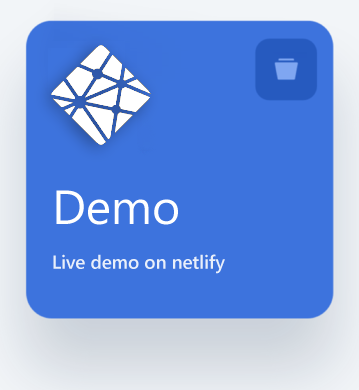
<style>
.page{position:relative;width:359px;height:390px;background:#3d73dd}
.page>*{position:absolute;margin:0}
.t1{font:18.7px "SegoeUI-Semibold";color:#e9effa}
.t2{font:48px "SegoeUI";color:#ffffff}
</style>
<div class="page">
<p class="t1" style="left:53px;top:190px;width:172px;height:84px"><span class="t2">Demo<br><br></span>Live demo on netlify</p>
</div>
